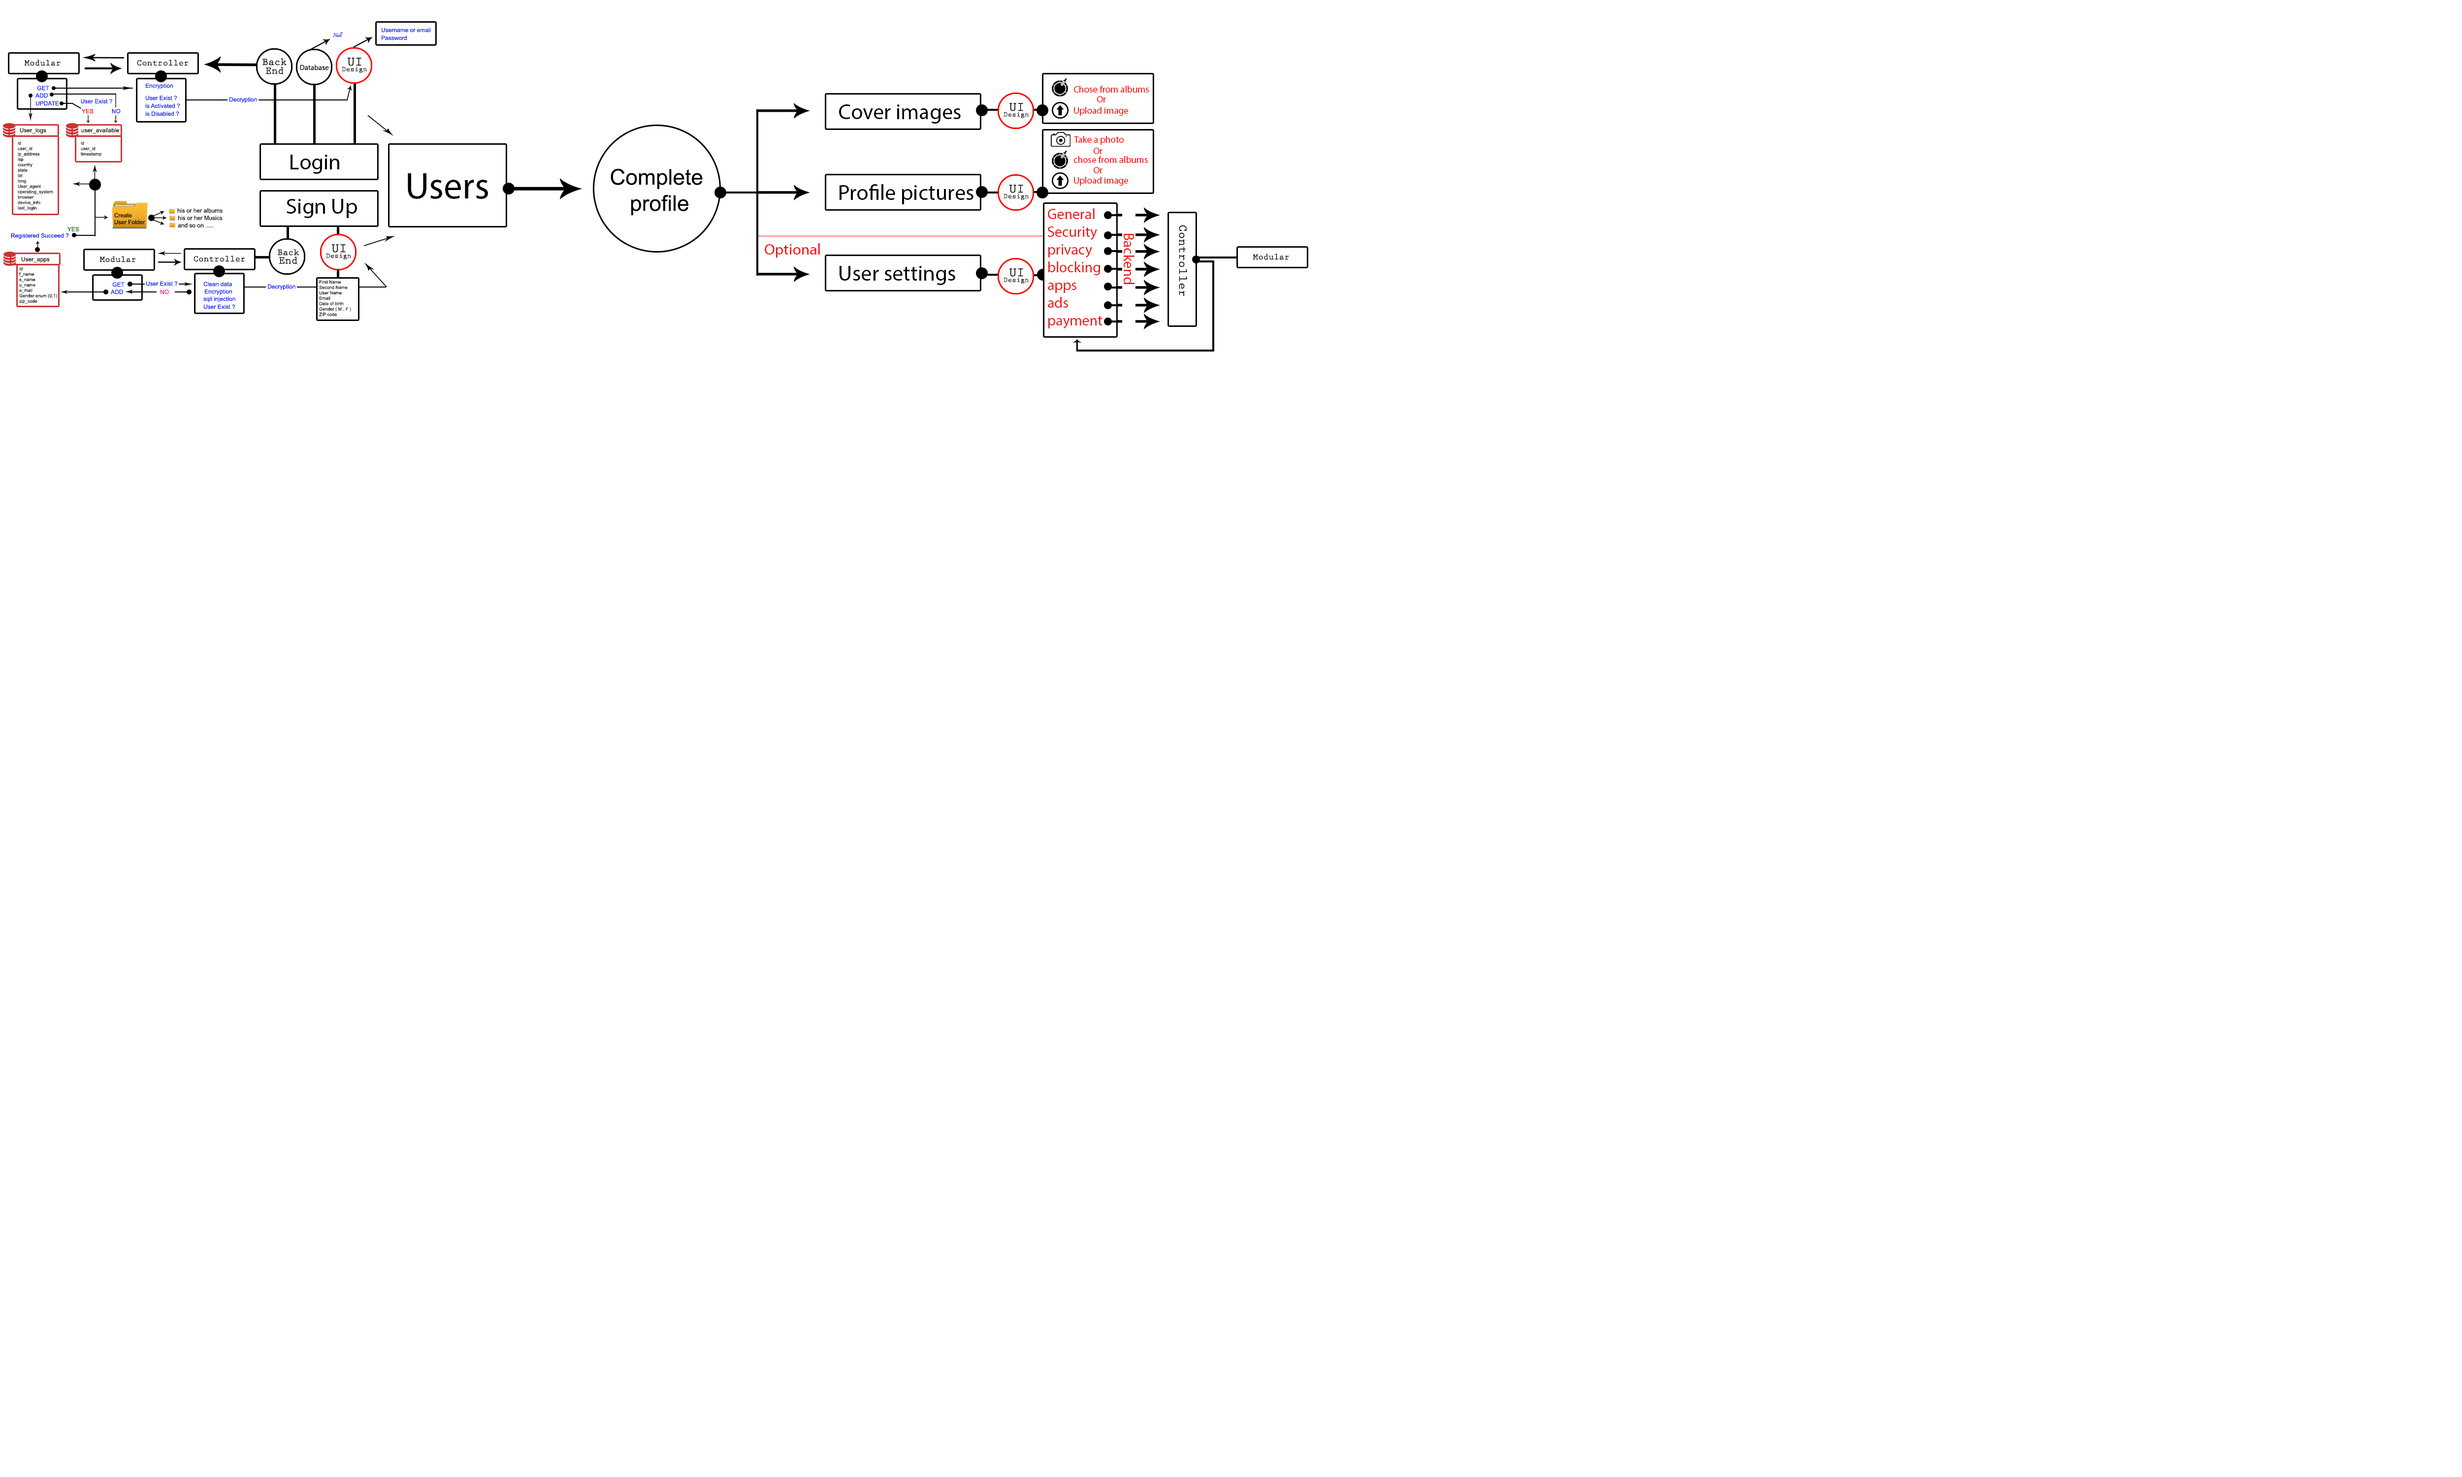
<style>
.page{position:relative;width:2462px;height:1477px;background:#ffffff}
.page>*{position:absolute;margin:0}
.t1{font:5.9px "ArialMT";color:#0012ff}
.t2{font:5.9px "Pristina-Regular";color:#0012ff}
.t3{font:8.7px "PrestigeEliteStd-Bd";color:#000000}
.t4{font:10.3px "PrestigeEliteStd-Bd";color:#000000}
.t5{font:7.4px "MyriadPro-Regular";color:#000000}
.t6{font:12.9px "PrestigeEliteStd-Bd";color:#000000}
.t7{font:7.1px "PrestigeEliteStd-Bd";color:#000000}
.t8{font:9.5px "MyriadPro-Regular";color:#ff0000}
.t9{font:5.9px "ArialMT";color:#e80000}
.t10{font:21.9px "MyriadPro-Regular";color:#000000}
.t11{font:5.9px "ArialMT";color:#000000}
.t12{font:4.5px "ArialMT";color:#000000}
.t13{font:37.2px "MyriadPro-Regular";color:#000000}
.t14{font:21.8px "ArialMT";color:#000000}
.t15{font:14.8px "MyriadPro-Regular";color:#f11414}
.t16{font:5.9px "ArialMT";color:#0101ff}
.t17{font:5.9px "ArialMT";color:#057300}
.t18{font:15px "MyriadPro-Regular";color:#f11414}
.t19{font:12.1px "PrestigeEliteStd-Bd";color:#000000}
.t20{font:15.4px "MyriadPro-Regular";color:#ff0000}
.t21{font:9.2px "PrestigeEliteStd-Bd";color:#000000}
.t22{font:10.9px "PrestigeEliteStd-Bd";color:#000000}
.t23{font:5.9px "ArialMT";color:#ff0687}
</style>
<div class="page">
<p class="t1" style="left:382px;top:28px;width:49px;height:5px">Username or email</p>
<p class="t2" style="left:333px;top:32px;width:10px;height:5px">Null</p>
<p class="t1" style="left:382px;top:35px;width:25px;height:5px">Password</p>
<p class="t3" style="left:24px;top:60px;width:37px;height:6px">Modular</p>
<p class="t3" style="left:137px;top:60px;width:52px;height:6px">Controller</p>
<p class="t4" style="left:262px;top:58px;width:25px;height:8px">Back</p>
<p class="t5" style="left:300px;top:65px;width:29px;height:5px">Database</p>
<p class="t6" style="left:348px;top:58px;width:13px;height:8px">UI</p>
<p class="t4" style="left:265px;top:67px;width:19px;height:7px">End</p>
<p class="t7" style="left:342px;top:66px;width:25px;height:7px">Design</p>
<p class="t1" style="left:37px;top:86px;width:12px;height:5px">GET</p>
<p class="t1" style="left:146px;top:83px;width:27px;height:6px">Encryption</p>
<p class="t8" style="left:1074px;top:86px;width:75px;height:7px">Chose from albums</p>
<p class="t1" style="left:35px;top:93px;width:13px;height:5px">ADD</p>
<p class="t1" style="left:36px;top:101px;width:23px;height:5px">UPDATE</p>
<p class="t1" style="left:81px;top:99px;width:31px;height:4px">User Exist ?</p>
<p class="t1" style="left:146px;top:96px;width:31px;height:4px">User Exist ?</p>
<p class="t1" style="left:229px;top:97px;width:28px;height:6px">Decryption</p>
<p class="t8" style="left:1097px;top:96px;width:9px;height:6px">Or</p>
<p class="t9" style="left:82px;top:109px;width:39px;height:5px">YES           <span class="t1">NO</span></p>
<p class="t1" style="left:145px;top:103px;width:35px;height:5px">is Activated ?</p>
<p class="t1" style="left:145px;top:111px;width:34px;height:5px">is Disabled ?</p>
<p class="t10" style="left:839px;top:104px;width:122px;height:20px">Cover images</p>
<p class="t7" style="left:1004px;top:112px;width:25px;height:6px">Design</p>
<p class="t6" style="left:1010px;top:103px;width:13px;height:8px">UI</p>
<p class="t8" style="left:1074px;top:107px;width:54px;height:9px">Upload image</p>
<p class="t11" style="left:20px;top:128px;width:26px;height:6px">User_logs</p>
<p class="t11" style="left:81px;top:128px;width:38px;height:6px">user_available</p>
<p class="t8" style="left:1074px;top:136px;width:50px;height:9px">Take a photo</p>
<p class="t12" style="left:18px;top:141px;width:35px;height:70px">id<br>user_id<br>ip_address<br>isp<br>country<br>state<br>lat<br>long<br>User_agent<br>operating_system<br>browser<br>device_info<br>last_login</p>
<p class="t12" style="left:81px;top:141px;width:20px;height:16px">id<br>user_id<br>timestamp</p>
<p class="t8" style="left:1094px;top:148px;width:9px;height:6px">Or</p>
<p class="t10" style="left:291px;top:155px;width:48px;height:19px">Login</p>
<p class="t8" style="left:1074px;top:156px;width:74px;height:7px">chose from albums</p>
<p class="t13" style="left:408px;top:173px;width:80px;height:26px">Users</p>
<p class="t14" style="left:611px;top:168px;width:92px;height:48px;text-align:center">Complete <br>profile</p>
<p class="t8" style="left:1094px;top:167px;width:9px;height:6px">Or</p>
<p class="t10" style="left:840px;top:184px;width:134px;height:20px">Profile pictures</p>
<p class="t6" style="left:1010px;top:185px;width:13px;height:8px">UI</p>
<p class="t8" style="left:1074px;top:177px;width:54px;height:9px">Upload image</p>
<p class="t7" style="left:1004px;top:194px;width:25px;height:6px">Design</p>
<p class="t11" style="left:177px;top:208px;width:46px;height:5px">his or her albums</p>
<p class="t10" style="left:287px;top:199px;width:70px;height:19px">Sign Up</p>
<p class="t15" style="left:1048px;top:208px;width:55px;height:121px">General<br>Security<br>privacy<br>blocking<br>apps<br>ads<br>payment</p>
<p class="t11" style="left:114px;top:220px;width:31px;height:5px">User Folder</p>
<p class="t11" style="left:114px;top:213px;width:18px;height:5px">Create</p>
<p class="t11" style="left:178px;top:216px;width:45px;height:4px">his or her Musics</p>
<p class="t16" style="left:11px;top:233px;width:58px;height:6px">Registered Succeed ?</p>
<p class="t17" style="left:67px;top:227px;width:12px;height:4px">YES</p>
<p class="t11" style="left:178px;top:223px;width:35px;height:5px">and so on .....</p>
<p class="t18" style="left:1124px;top:234px;width:11px;height:50px;rotate:90deg">Backend</p>
<p class="t19" style="left:1179px;top:225px;width:8px;height:71px;rotate:90deg">Controller</p>
<p class="t6" style="left:332px;top:244px;width:14px;height:9px">UI</p>
<p class="t20" style="left:765px;top:243px;width:55px;height:15px">Optional</p>
<p class="t11" style="left:21px;top:257px;width:29px;height:6px">User_apps</p>
<p class="t3" style="left:99px;top:256px;width:37px;height:6px">Modular</p>
<p class="t3" style="left:194px;top:256px;width:51px;height:6px">Controller</p>
<p class="t21" style="left:278px;top:249px;width:21px;height:7px">Back</p>
<p class="t22" style="left:279px;top:257px;width:18px;height:7px">End</p>
<p class="t7" style="left:326px;top:253px;width:25px;height:7px">Design</p>
<p class="t3" style="left:1253px;top:254px;width:36px;height:6px">Modular</p>
<p class="t12" style="left:19px;top:267px;width:38px;height:37px">id<br>f_name<br>s_name<br>u_name<br>e_mail<br>Gender enum (0,1)<br>zip_code</p>
<p class="t10" style="left:840px;top:266px;width:115px;height:19px">User settings</p>
<p class="t6" style="left:1010px;top:268px;width:13px;height:9px">UI</p>
<p class="t1" style="left:146px;top:281px;width:32px;height:5px">User Exist ?</p>
<p class="t1" style="left:203px;top:282px;width:29px;height:5px">Clean data</p>
<p class="t12" style="left:319px;top:280px;width:32px;height:36px">First Name<br>Second Name<br>User Name<br>Email<br>Date of birth<br>Gender ( M , F )<br>ZIP code</p>
<p class="t7" style="left:1004px;top:277px;width:25px;height:7px">Design</p>
<p class="t1" style="left:111px;top:290px;width:12px;height:5px">ADD</p>
<p class="t1" style="left:112px;top:282px;width:13px;height:5px">GET</p>
<p class="t23" style="left:161px;top:290px;width:8px;height:5px">NO</p>
<p class="t1" style="left:205px;top:289px;width:27px;height:6px">Encryption</p>
<p class="t1" style="left:268px;top:284px;width:27px;height:6px">Decryption</p>
<p class="t1" style="left:203px;top:296px;width:32px;height:6px">sqli injection</p>
<p class="t1" style="left:204px;top:304px;width:31px;height:5px">User Exist ?</p>
</div>
